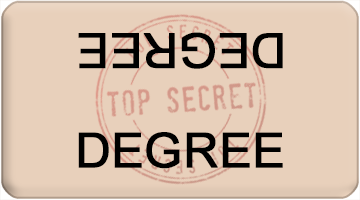
<style>
.page{position:relative;width:360px;height:200px;background:#e8d0bb}
.page>*{position:absolute;margin:0}
.t1{font:48px "ArialMT";color:#000000;font-weight:bold}
</style>
<div class="page">
<p class="t1" style="left:78px;top:32px;width:205px;height:37px;rotate:180deg">DEGREE</p>
<p class="t1" style="left:78px;top:132px;width:205px;height:37px">DEGREE</p>
</div>
